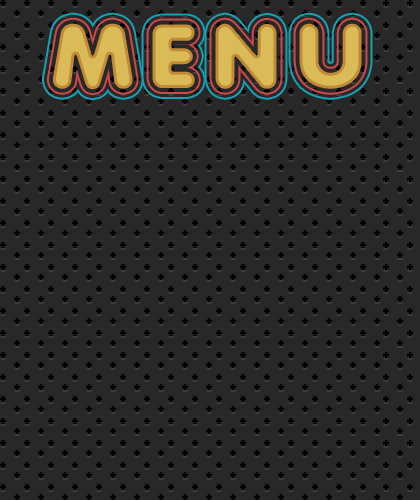
<style>
.page{position:relative;width:420px;height:500px;background:#282828}
.page>*{position:absolute;margin:0}
.t1{font:90px "Anja-Eliane-Nornal";letter-spacing:0.15em;color:#dbbb57;text-transform:uppercase}
</style>
<div class="page">
<p class="t1" style="left:52px;top:22px;width:311px;height:69px">Menu</p>
</div>
